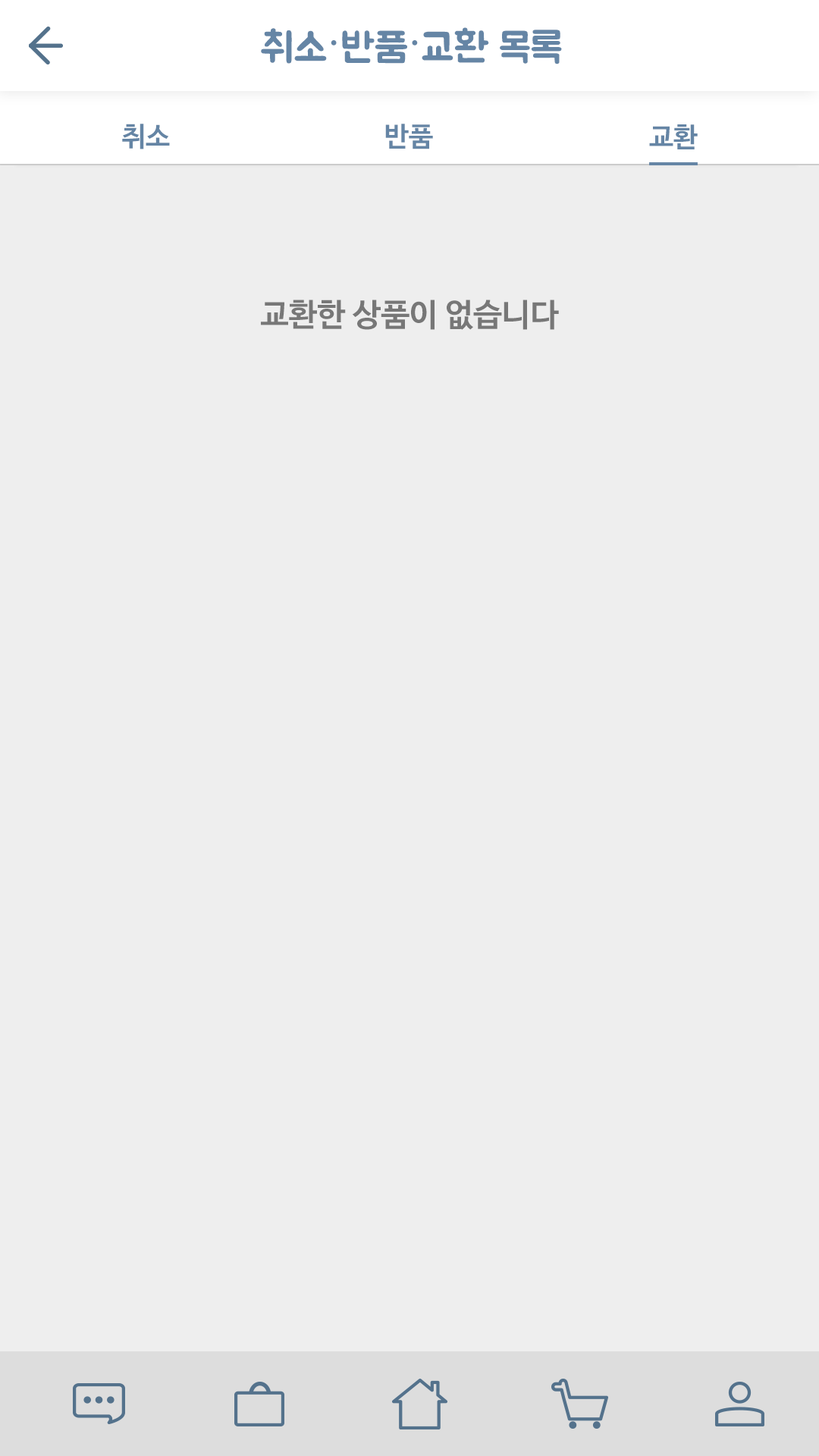
<style>
.page{position:relative;width:819px;height:1456px;background:#eeeeee}
.page>*{position:absolute;margin:0}
.t1{font:40.9px "BMJUA";color:#6585a5}
.t2{font:40.9px "OSeongandHanEum-Regular";color:#6585a5}
.t3{font:27.3px "NanumBarunGothicBold";color:#6585a5}
.t4{font:31.8px "NanumBarunGothicBold";color:#777777}
</style>
<div class="page">
<p class="t1" style="left:261px;top:27px;width:301px;height:37px">취소<span class="t2">·</span>반품<span class="t2">·</span>교환 목록</p>
<p class="t3" style="left:122px;top:124px;width:48px;height:25px">취소</p>
<p class="t3" style="left:385px;top:124px;width:48px;height:25px">반품</p>
<p class="t3" style="left:649px;top:124px;width:49px;height:25px">교환</p>
<p class="t4" style="left:261px;top:300px;width:298px;height:30px">교환한 상품이 없습니다</p>
</div>
